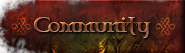
<style>
.page{position:relative;width:185px;height:53px}
.page>*{position:absolute;margin:0}
.t1{font:19px "CelticGaramondthe2nd";letter-spacing:-0.06em}
</style>
<div class="page">
<p class="t1" style="left:33px;top:17px;width:118px;height:21px">Community</p>
</div>
